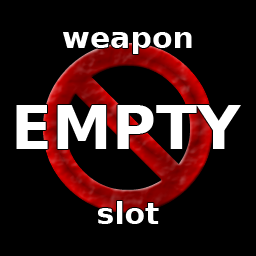
<style>
.page{position:relative;width:256px;height:256px;background:#000000}
.page>*{position:absolute;margin:0}
.t1{font:30px "BitstreamVeraSans-Bold";color:#ffffff}
.t2{font:60px "BitstreamVeraSans-Bold";color:#ffffff}
</style>
<div class="page">
<p class="t1" style="left:63px;top:32px;width:129px;height:22px">weapon</p>
<p class="t2" style="left:16px;top:105px;width:225px;height:44px">EMPTY</p>
<p class="t1" style="left:98px;top:201px;width:61px;height:23px">slot</p>
</div>
